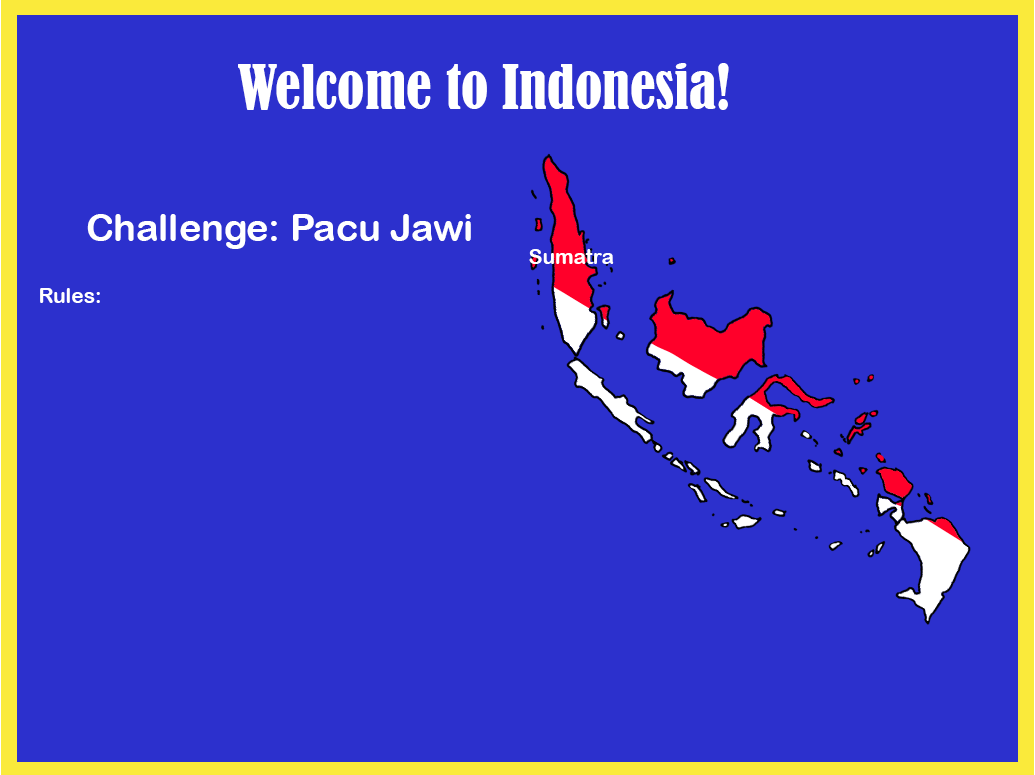
<style>
.page{position:relative;width:1035px;height:775px;background:#2c30cd}
.page>*{position:absolute;margin:0}
.t1{font:56.9px "BernardMT-Condensed";color:#ffffff}
.t2{font:37.5px "ArialRoundedMTBold";color:#ffffff}
.t3{font:20.9px "ArialRoundedMTBold";color:#ffffff}
</style>
<div class="page">
<p class="t1" style="left:238px;top:63px;width:491px;height:47px">Welcome to Indonesia!</p>
<p class="t2" style="left:87px;top:214px;width:384px;height:35px">Challenge: Pacu Jawi</p>
<p class="t3" style="left:529px;top:249px;width:85px;height:15px">Sumatra</p>
<p class="t3" style="left:40px;top:288px;width:60px;height:15px">Rules:</p>
</div>
